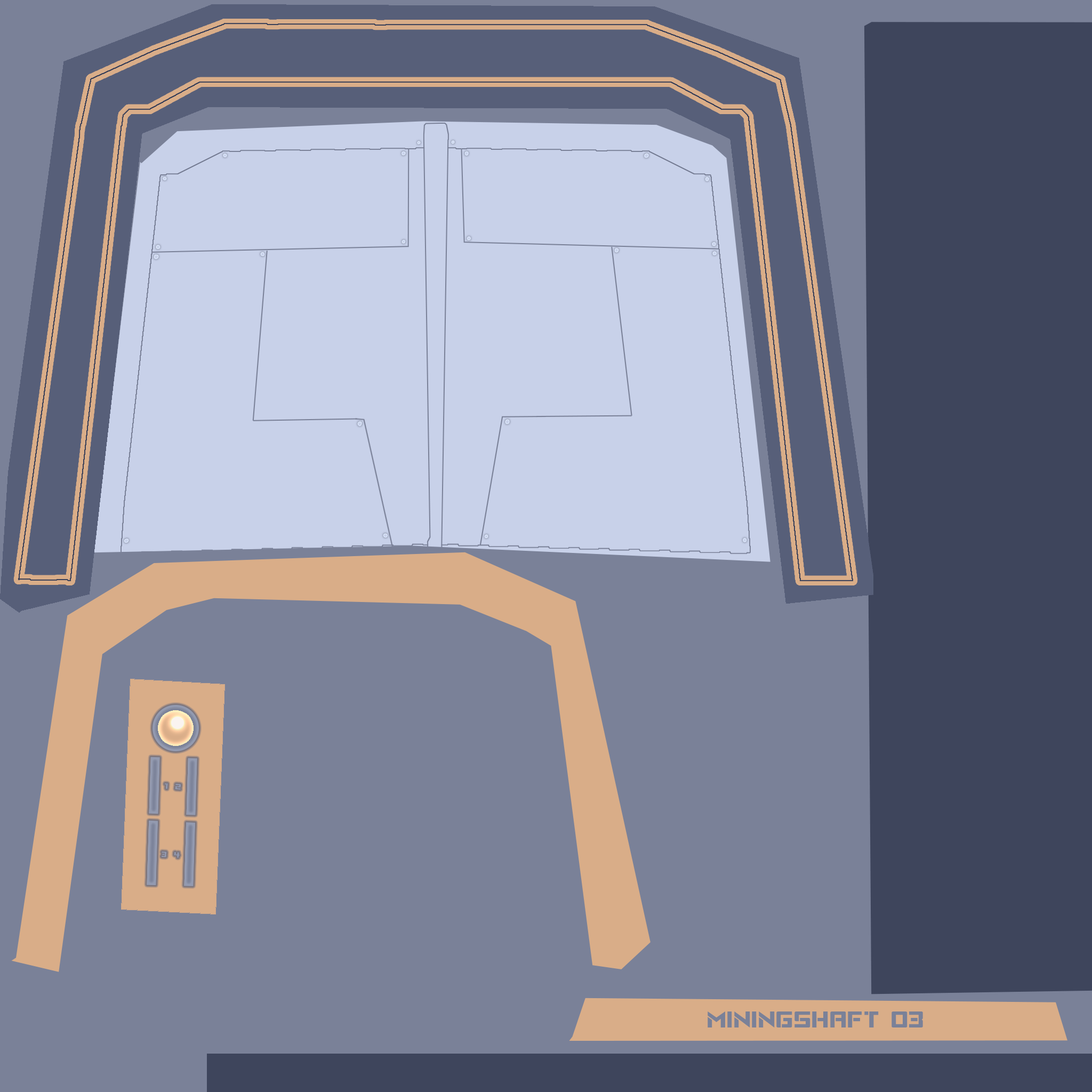
<style>
.page{position:relative;width:1092px;height:1092px;background:#7a8198}
.page>*{position:absolute;margin:0}
.t1{font:38.4px "VikingSquad";color:#7a8198}
</style>
<div class="page">
<p class="t1" style="left:708px;top:1011px;width:215px;height:16px">miningshaft 03</p>
</div>
